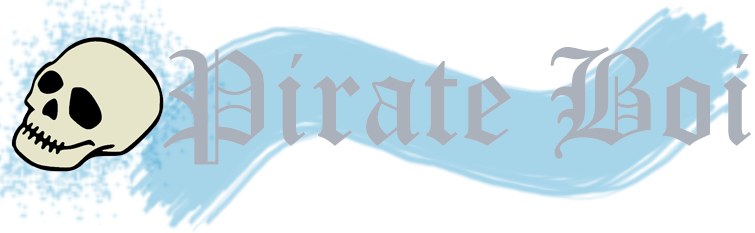
<style>
.page{position:relative;width:755px;height:233px;background:#ffffff}
.page>*{position:absolute;margin:0}
.t1{font:133.1px "OldEnglishTextMT";color:#abb1ba}
</style>
<div class="page">
<p class="t1" style="left:163px;top:47px;width:588px;height:118px">Pirate Boi</p>
</div>
